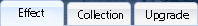
<style>
.page{position:relative;width:198px;height:26px;background:#f6f6f6}
.page>*{position:absolute;margin:0}
.t1{font:12px "MyriadPro-Regular";color:#000000}
.t2{font:12px "MyriadPro-Regular";color:#000000;scale:0.9 1}
</style>
<div class="page">
<p class="t1" style="left:19px;top:8px;width:25px;height:9px">Effect</p>
<p class="t2" style="left:78px;top:10px;width:45px;height:9px">Collection</p>
<p class="t1" style="left:146px;top:10px;width:43px;height:11px">Upgrade</p>
</div>
